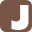
<style>
.page{position:relative;width:32px;height:32px;background:#795548}
.page>*{position:absolute;margin:0}
.t1{font:30px "SansPosterBoldJL";color:#ffffff}
</style>
<div class="page">
<p class="t1" style="left:11px;top:5px;width:18px;height:25px">J</p>
</div>
